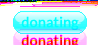
<style>
.page{position:relative;width:98px;height:45px;background:#ffffff}
.page>*{position:absolute;margin:0}
.t1{font:14px "Lato-Regular";font-weight:bold}
</style>
<div class="page">
<p class="t1" style="left:21px;top:15px;width:58px;height:14px">donating</p>
</div>
